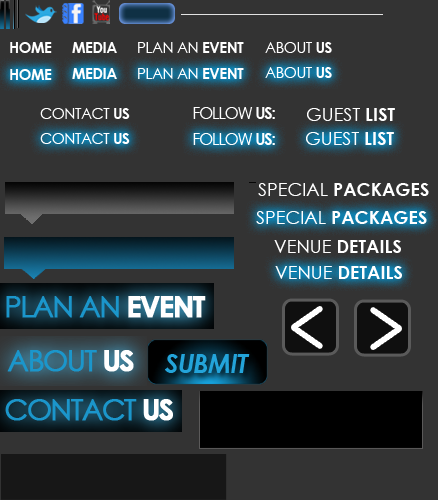
<style>
.page{position:relative;width:438px;height:500px;background:#333333}
.page>*{position:absolute;margin:0}
.t1{font:15px "CenturyGothic-Bold";letter-spacing:-0.03em;color:#ffffff}
.t2{font:15px "CenturyGothic";letter-spacing:-0.03em;color:#ffffff}
.t3{font:15.5px "CenturyGothic";letter-spacing:-0.05em;color:#ffffff}
.t4{font:15.5px "CenturyGothic-Bold";letter-spacing:-0.05em;color:#ffffff}
.t5{font:18.1px "CenturyGothic";color:#ffffff}
.t6{font:18.1px "CenturyGothic-Bold";color:#ffffff}
</style>
<div class="page">
<p class="t1" style="left:10px;top:42px;width:42px;height:11px">HOME</p>
<p class="t1" style="left:72px;top:42px;width:45px;height:11px">MEDIA</p>
<p class="t2" style="left:138px;top:42px;width:106px;height:11px">PLAN AN <span class="t1">EVENT</span></p>
<p class="t2" style="left:265px;top:42px;width:67px;height:11px">ABOUT<span class="t1"> US</span></p>
<p class="t1" style="left:10px;top:69px;width:42px;height:11px">HOME</p>
<p class="t1" style="left:72px;top:68px;width:45px;height:11px">MEDIA</p>
<p class="t2" style="left:138px;top:68px;width:106px;height:11px">PLAN AN <span class="t1">EVENT</span></p>
<p class="t2" style="left:265px;top:67px;width:67px;height:11px">ABOUT<span class="t1"> US</span></p>
<p class="t2" style="left:40px;top:108px;width:90px;height:11px">CONTACT <span class="t1">US</span></p>
<p class="t3" style="left:193px;top:107px;width:82px;height:12px">FOLLOW <span class="t4">US:</span></p>
<p class="t5" style="left:307px;top:108px;width:88px;height:13px">GUEST <span class="t6">LIST</span></p>
<p class="t2" style="left:40px;top:133px;width:90px;height:11px">CONTACT <span class="t1">US</span></p>
<p class="t3" style="left:193px;top:133px;width:82px;height:12px">FOLLOW <span class="t4">US:</span></p>
<p class="t5" style="left:306px;top:132px;width:88px;height:13px">GUEST <span class="t6">LIST</span></p>
<p class="t6" style="left:258px;top:183px;width:171px;height:13px"><span class="t5">SPECIAL </span>PACKAGES</p>
<p class="t6" style="left:256px;top:211px;width:171px;height:13px"><span class="t5">SPECIAL </span>PACKAGES</p>
<p class="t6" style="left:274px;top:240px;width:127px;height:13px"><span class="t5">VENUE </span>DETAILS</p>
<p class="t6" style="left:275px;top:266px;width:127px;height:13px"><span class="t5">VENUE </span>DETAILS</p>
</div>
